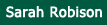
<style>
.page{position:relative;width:107px;height:25px;background:#005941}
.page>*{position:absolute;margin:0}
.t1{font:14px "Tahoma";letter-spacing:0.02em;color:#ffffff;font-weight:bold}
</style>
<div class="page">
<p class="t1" style="left:6px;top:6px;width:96px;height:12px">Sarah Robison</p>
</div>
